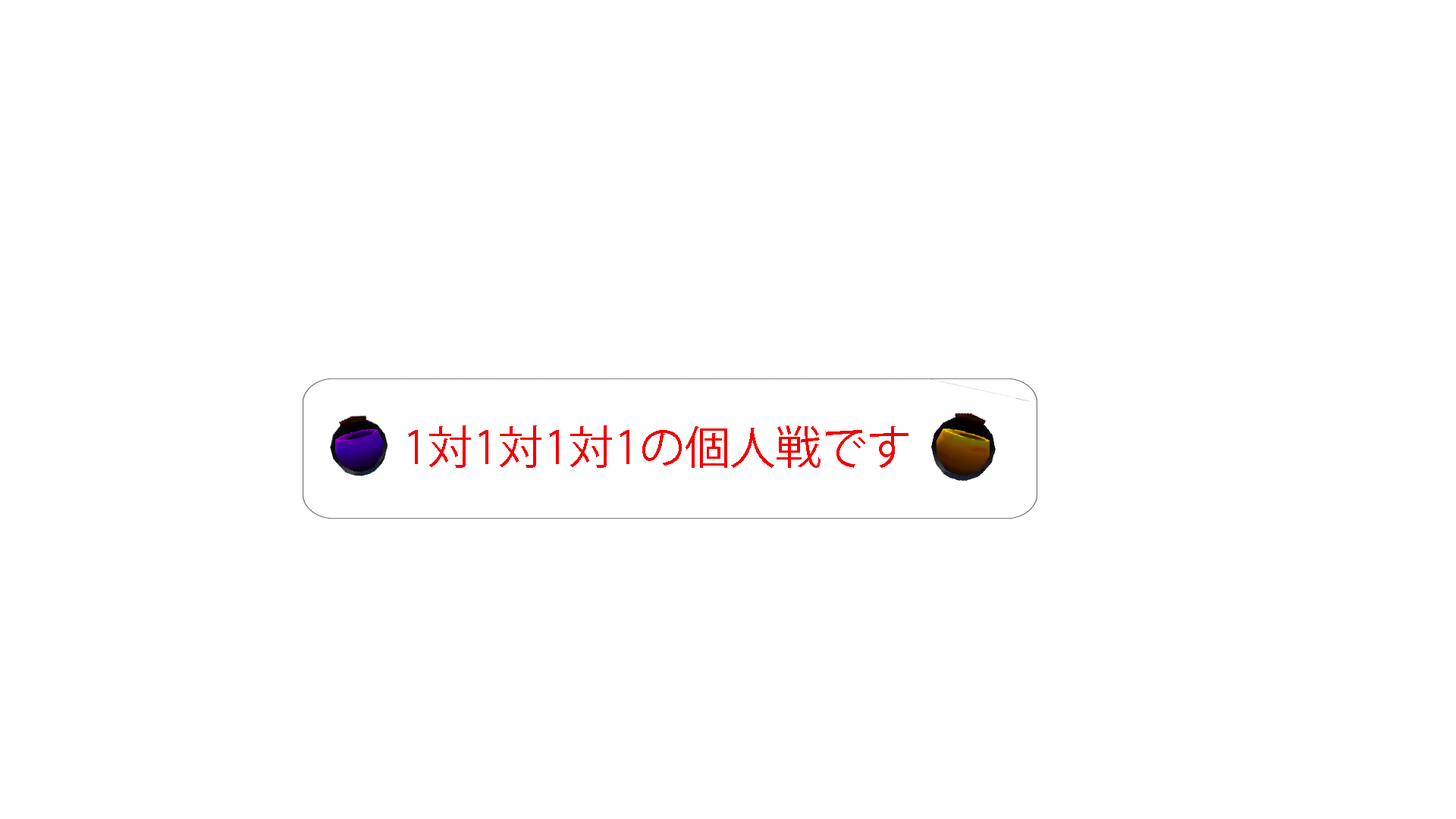
<style>
.page{position:relative;width:1456px;height:819px;background:#ffffff}
.page>*{position:absolute;margin:0}
.t1{font:45.5px "KozGoPr6N-Regular";color:#f00000}
</style>
<div class="page">
<p class="t1" style="left:408px;top:425px;width:500px;height:43px">1対1対1対1の個人戦です</p>
</div>
